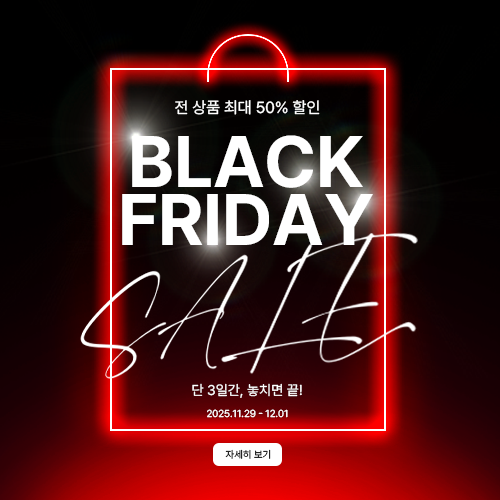
<style>
.page{position:relative;width:500px;height:500px}
.page>*{position:absolute;margin:0}
.t1{font:16px "Pretendard-Regular";color:#ffffff;text-transform:uppercase}
.t2{font:72px/58px "Pretendard-Bold";letter-spacing:-0.02em;color:#ffffff;text-transform:uppercase}
.t3{font:14px "Pretendard-Regular";color:#ffffff;text-transform:uppercase}
.t4{font:10px "Pretendard-Regular";color:#ffffff;text-transform:uppercase}
.t5{font:10px "Pretendard-Regular";text-transform:uppercase}
</style>
<div class="page">
<p class="t1" style="left:175px;top:100px;width:145px;height:15px">전 상품 최대 50% 할인</p>
<p class="t2" style="left:122px;top:135px;width:251px;height:110px;text-align:center">black<br>friday</p>
<p class="t3" style="left:192px;top:383px;width:110px;height:15px">단 3일간, 놓치면 끝!</p>
<p class="t4" style="left:207px;top:409px;width:81px;height:9px">2025.11.29 - 12.01</p>
<p class="t5" style="left:225px;top:449px;width:46px;height:10px">자세히 보기</p>
</div>
